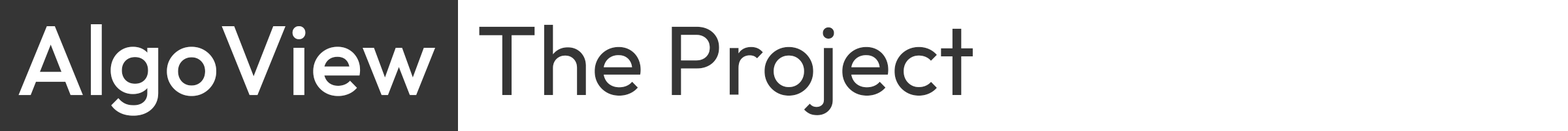
<style>
.page{position:relative;width:1568px;height:131px;background:#ffffff}
.page>*{position:absolute;margin:0}
.t1{font:98px "Outfit-Medium";color:#ffffff}
.t2{font:98px "Outfit-Regular";color:#353535}
</style>
<div class="page">
<p class="t1" style="left:18px;top:24px;width:417px;height:92px">AlgoView</p>
<p class="t2" style="left:479px;top:24px;width:494px;height:91px">The Project</p>
</div>
